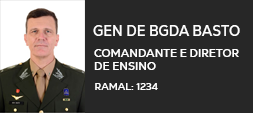
<style>
.page{position:relative;width:253px;height:113px;background:#272727}
.page>*{position:absolute;margin:0}
.t1{font:14.6px "NexaTextDemo-Bold";color:#fefefe;text-transform:uppercase;scale:0.94 1}
.t2{font:11.3px "NexaTextDemo-Bold";color:#fefefe;text-transform:uppercase}
.t3{font:10px "NexaTextDemo-Bold";color:#fefefe;text-transform:uppercase}
</style>
<div class="page">
<p class="t1" style="left:93px;top:25px;width:147px;height:11px">Gen de Bgda Basto</p>
<p class="t2" style="left:94px;top:49px;width:145px;height:21px">Comandante e Diretor<br>de Ensino</p>
<p class="t3" style="left:95px;top:83px;width:63px;height:7px">RAMAL: 1234</p>
</div>
